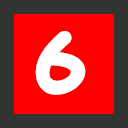
<style>
.page{position:relative;width:128px;height:128px;background:#ff0000}
.page>*{position:absolute;margin:0}
.t1{font:96.2px "Mabook";letter-spacing:0.075em;color:#ffffff}
</style>
<div class="page">
<p class="t1" style="left:35px;top:31px;width:51px;height:64px">6</p>
</div>
